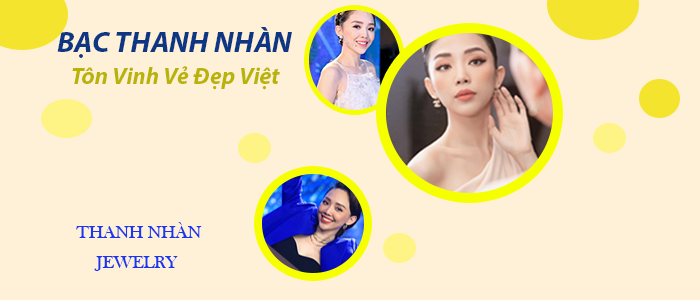
<style>
.page{position:relative;width:700px;height:300px;background:#fef1d7}
.page>*{position:absolute;margin:0}
.t1{font:29.9px "MyriadPro-BoldIt";color:#0d3785}
.t2{font:23.6px "MyriadPro-BoldIt";color:#b9b307}
.t3{font:17.7px "BaskOldFace";color:#1937ef}
</style>
<div class="page">
<p class="t1" style="left:57px;top:27px;width:235px;height:31px">BẠC THANH NHÀN</p>
<p class="t2" style="left:72px;top:66px;width:208px;height:24px">Tôn Vinh Vẻ Đẹp Việt</p>
<p class="t3" style="left:76px;top:222px;width:126px;height:16px">THANH NHÀN</p>
<p class="t3" style="left:94px;top:256px;width:84px;height:15px">JEWELRY</p>
</div>
